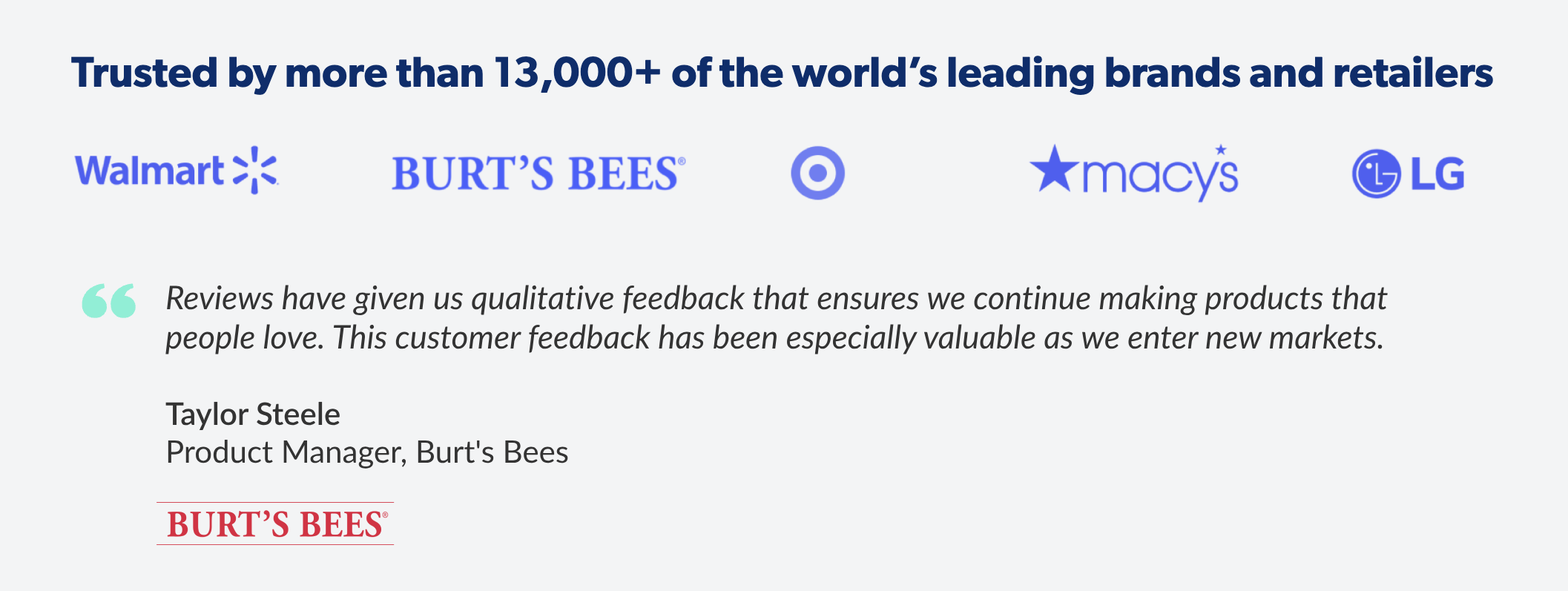
<style>
.page{position:relative;width:1568px;height:591px;background:#f3f4f5}
.page>*{position:absolute;margin:0}
.t1{font:32.6px "Lato-Italic";color:#333333}
.t2{font:31.2px "Lato-Semibold";color:#333333}
.t3{font:31.2px "Lato-Regular";color:#333333}
</style>
<div class="page">
<p class="t1" style="left:165px;top:285px;width:1223px;height:184px">Reviews have given us qualitative feedback that ensures we continue making products that people love. This customer feedback has been especially valuable as we enter new markets.<br><br><span class="t2">Taylor Steele<br></span><span class="t3">Product Manager, Burt's Bees</span></p>
</div>
